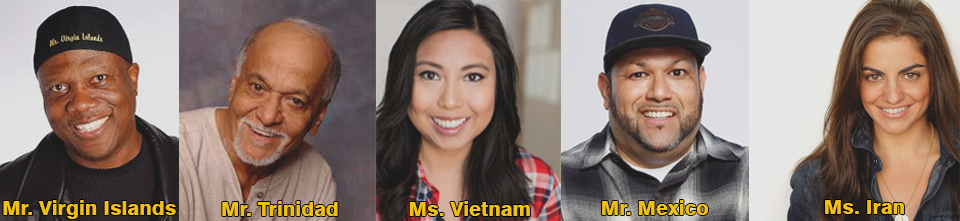
<style>
.page{position:relative;width:960px;height:221px}
.page>*{position:absolute;margin:0}
.t1{font:20px "Swiss721BT-Heavy";color:#f1c015}
</style>
<div class="page">
<p class="t1" style="left:3px;top:200px;width:173px;height:19px">Mr. Virgin Islands</p>
<p class="t1" style="left:222px;top:201px;width:116px;height:15px">Mr. Trinidad</p>
<p class="t1" style="left:409px;top:201px;width:121px;height:15px">Ms. Vietnam</p>
<p class="t1" style="left:602px;top:200px;width:107px;height:15px">Mr. Mexico</p>
<p class="t1" style="left:825px;top:200px;width:79px;height:14px">Ms. Iran</p>
</div>
